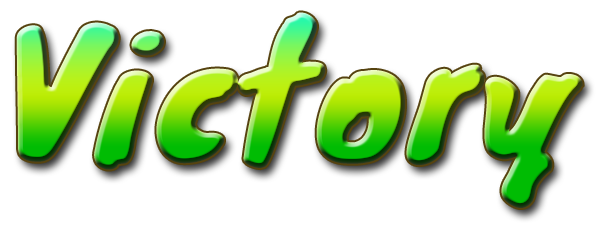
<style>
.page{position:relative;width:600px;height:227px;background:#ffffff}
.page>*{position:absolute;margin:0}
.t1{font:170px "Knewave";font-weight:bold}
</style>
<div class="page">
<p class="t1" style="left:16px;top:12px;width:567px;height:196px">Victory</p>
</div>
